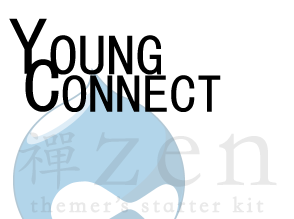
<style>
.page{position:relative;width:294px;height:219px;background:#ffffff}
.page>*{position:absolute;margin:0}
.t1{font:77.1px/37.5px "SimHei";color:#000000;font-variant:small-caps}
.t2{font:82.3px/27.1px "SimHei";color:#000000;font-variant:small-caps}
.t3{font:69.6px "STKaiti";letter-spacing:-0.025em;color:#a6c4d7}
.t4{font:121.8px "STKaiti";letter-spacing:0.075em}
.t5{font:22.6px "STKaiti";letter-spacing:0.118em;color:#e9e9e9;font-weight:bold}
</style>
<div class="page">
<p class="t1" style="left:9px;top:18px;width:212px;height:94px"><span class="t2">Young<br></span>Connect</p>
<p class="t3" style="left:18px;top:132px;width:62px;height:58px">禪</p>
<p class="t4" style="left:94px;top:132px;width:183px;height:55px">zen</p>
<p class="t5" style="left:30px;top:196px;width:234px;height:17px">themer’s starter kit</p>
</div>
